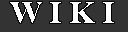
<style>
.page{position:relative;width:128px;height:32px;background:#333333}
.page>*{position:absolute;margin:0}
.t1{font:32px "TimesNewRomanPS-BoldMT";letter-spacing:0.25em;color:#ffffff}
</style>
<div class="page">
<p class="t1" style="left:10px;top:2px;width:104px;height:21px">WIKI</p>
</div>
